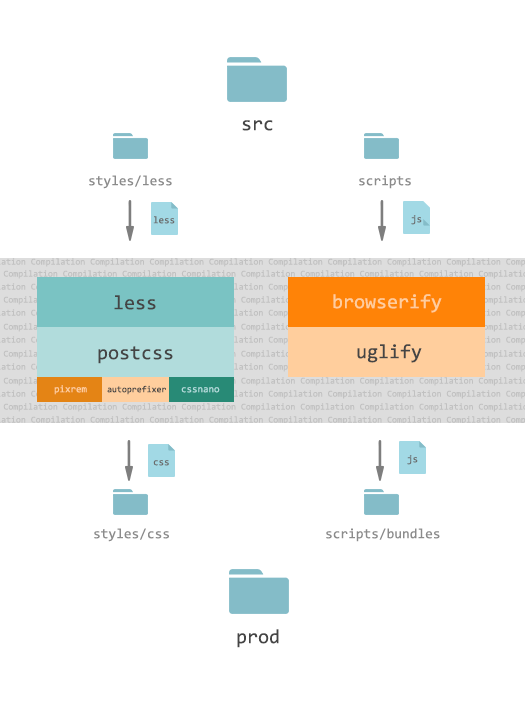
<style>
.page{position:relative;width:525px;height:702px;background:#ffffff}
.page>*{position:absolute;margin:0}
.t1{font:20px "Consolas";color:#454545}
.t2{font:14px "Consolas";color:#8b8b8b}
.t3{font:10px "Consolas";color:#6a6a6a}
.t4{font:20px "Consolas";color:#ffce9d}
.t5{font:10px "Consolas";color:#ffce9d}
.t6{font:9px "Consolas";color:#454545}
.t7{font:10px "Consolas";color:#b1dcdc}
</style>
<div class="page">
<p class="t1" style="left:242px;top:120px;width:31px;height:11px">src</p>
<p class="t2" style="left:89px;top:175px;width:83px;height:14px">styles/less</p>
<p class="t2" style="left:359px;top:175px;width:52px;height:14px">scripts</p>
<p class="t3" style="left:153px;top:216px;width:22px;height:8px">less</p>
<p class="t3" style="left:411px;top:215px;width:11px;height:10px">js</p>
<p class="t4" style="left:333px;top:294px;width:109px;height:19px">browserify</p>
<p class="t1" style="left:114px;top:295px;width:42px;height:15px">less</p>
<p class="t1" style="left:98px;top:346px;width:75px;height:18px">postcss</p>
<p class="t1" style="left:357px;top:344px;width:65px;height:19px">uglify</p>
<p class="t5" style="left:54px;top:385px;width:33px;height:10px">pixrem</p>
<p class="t6" style="left:107px;top:385px;width:59px;height:10px">autoprefixer</p>
<p class="t7" style="left:181px;top:387px;width:39px;height:6px">cssnano</p>
<p class="t3" style="left:153px;top:460px;width:16px;height:6px">css</p>
<p class="t3" style="left:407px;top:455px;width:11px;height:10px">js</p>
<p class="t2" style="left:94px;top:528px;width:75px;height:14px">styles/css</p>
<p class="t2" style="left:326px;top:528px;width:114px;height:14px">scripts/bundles</p>
<p class="t1" style="left:237px;top:629px;width:42px;height:19px">prod</p>
</div>
